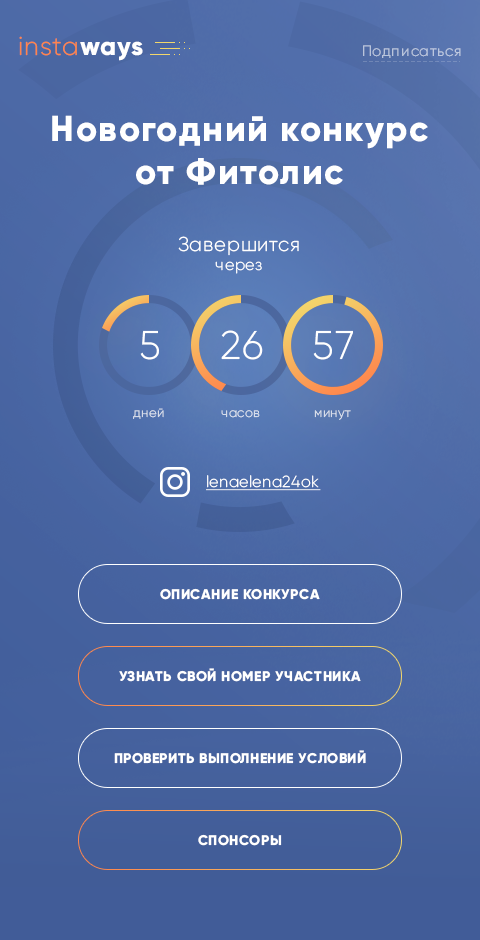
<style>
.page{position:relative;width:480px;height:940px}
.page>*{position:absolute;margin:0}
.t1{font:26px "Gilroy-Light";letter-spacing:0.04em;color:#ff854c}
.t2{font:26px "Gilroy-ExtraBold";letter-spacing:0.04em;color:#ffffff}
.t3{font:15px "Gilroy-Light";letter-spacing:0.04em;color:#b9c5db}
.t4{font:36px "Gilroy-ExtraBold";letter-spacing:0.04em;color:#ffffff}
.t5{font:20px "Gilroy-Light";letter-spacing:0.04em;color:#ffffff}
.t6{font:16px "Gilroy-Light";letter-spacing:0.04em;color:#ffffff}
.t7{font:40px "Gilroy-Light";letter-spacing:0.04em;color:#ffffff}
.t8{font:13px "Gilroy-Light";letter-spacing:0.04em;color:#d5dbe8}
.t9{font:13px "Gilroy-Light";letter-spacing:0.04em;color:#d6ddea}
.t10{font:13px "Gilroy-Light";letter-spacing:0.04em;color:#d6dce9}
.t11{font:16px "Gilroy-Light";letter-spacing:0.04em;color:#ffffff;text-decoration:underline}
.t12{font:14px "Gilroy-ExtraBold";letter-spacing:0.04em;color:#ffffff;text-transform:uppercase}
</style>
<div class="page">
<p class="t1" style="left:19px;top:36px;width:124px;height:25px">insta<span class="t2">ways</span></p>
<p class="t3" style="left:363px;top:45px;width:98px;height:13px">Подписаться</p>
<p class="t4" style="left:52px;top:115px;width:376px;height:70px;text-align:center">Новогодний конкурс<br>от Фитолис</p>
<p class="t5" style="left:178px;top:236px;width:121px;height:38px;text-align:center">Завершится<br><span class="t6">через</span></p>
<p class="t7" style="left:140px;top:330px;width:19px;height:30px">5</p>
<p class="t7" style="left:221px;top:330px;width:42px;height:30px">26</p>
<p class="t7" style="left:313px;top:330px;width:40px;height:30px">57</p>
<p class="t8" style="left:133px;top:408px;width:31px;height:11px">дней</p>
<p class="t9" style="left:221px;top:410px;width:39px;height:8px">часов</p>
<p class="t10" style="left:314px;top:410px;width:37px;height:10px">минут</p>
<p class="t11" style="left:206px;top:475px;width:115px;height:16px">lenaelena24ok</p>
<p class="t12" style="left:160px;top:588px;width:160px;height:12px">Описание конкурса</p>
<p class="t12" style="left:119px;top:668px;width:242px;height:14px">Узнать свой номер участника</p>
<p class="t12" style="left:114px;top:750px;width:252px;height:14px">Проверить выполнение условий</p>
<p class="t12" style="left:198px;top:834px;width:84px;height:12px">Спонсоры</p>
</div>
